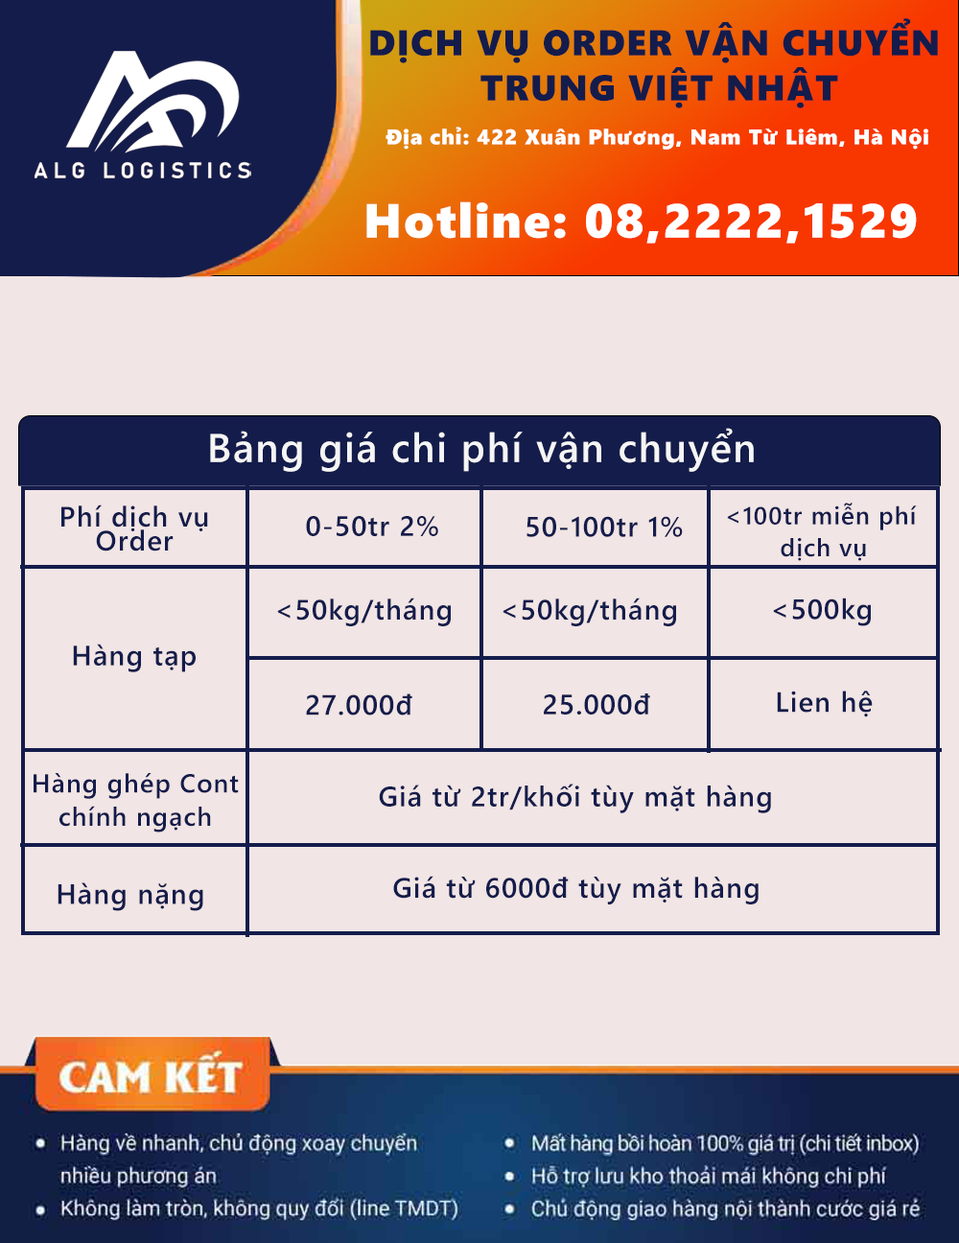
<style>
.page{position:relative;width:959px;height:1243px;background:#f1e5e5}
.page>*{position:absolute;margin:0}
.t1{font:36px/45.1px "SegoeUIBlack";letter-spacing:0.04em;color:#141c4b}
.t2{font:21.2px "SegoeUIBlack";letter-spacing:0.04em;color:#ffffff}
.t3{font:48px "SegoeUIBlack";letter-spacing:0.04em;color:#ffffff}
.t4{font:40px "SegoeUI-Semibold";letter-spacing:0.04em;color:#f5f5f5}
.t5{font:28px/24px "SegoeUI-Semibold";letter-spacing:0.04em;color:#141c4b}
.t6{font:24.7px/31.8px "SegoeUI-Semibold";letter-spacing:0.04em;color:#141c4b}
.t7{font:28px "SegoeUI-Semibold";letter-spacing:0.04em;color:#141c4b}
.t8{font:26px/33.4px "SegoeUI-Semibold";letter-spacing:0.04em;color:#141c4b}
</style>
<div class="page">
<p class="t1" style="left:370px;top:18px;width:568px;height:90px;text-align:center">DỊCH VỤ ORDER VẬN CHUYỂN <br>TRUNG VIỆT NHẬT</p>
<p class="t2" style="left:386px;top:127px;width:543px;height:23px">Địa chỉ: 422 Xuân Phương, Nam Từ Liêm, Hà Nội</p>
<p class="t3" style="left:366px;top:201px;width:551px;height:43px">Hotline: 08,2222,1529</p>
<p class="t4" style="left:210px;top:428px;width:544px;height:44px">Bảng giá chi phí vận chuyển</p>
<p class="t5" style="left:61px;top:505px;width:147px;height:47px;text-align:center">Phí dịch vụ<br>Order</p>
<p class="t6" style="left:727px;top:503px;width:190px;height:58px;text-align:center">&lt;100tr miễn phí <br>dịch vụ</p>
<p class="t7" style="left:306px;top:516px;width:132px;height:20px">0-50tr 2%</p>
<p class="t7" style="left:527px;top:516px;width:156px;height:21px">50-100tr 1%</p>
<p class="t7" style="left:277px;top:598px;width:174px;height:28px">&lt;50kg/tháng</p>
<p class="t7" style="left:503px;top:598px;width:173px;height:28px">&lt;50kg/tháng</p>
<p class="t7" style="left:773px;top:598px;width:98px;height:28px">&lt;500kg</p>
<p class="t7" style="left:73px;top:644px;width:123px;height:28px">Hàng tạp</p>
<p class="t7" style="left:306px;top:694px;width:106px;height:22px">27.000đ</p>
<p class="t7" style="left:544px;top:694px;width:106px;height:21px">25.000đ</p>
<p class="t7" style="left:777px;top:691px;width:96px;height:26px">Lien hệ</p>
<p class="t8" style="left:34px;top:773px;width:205px;height:60px;text-align:center">Hàng ghép Cont<br>chính ngạch</p>
<p class="t7" style="left:379px;top:784px;width:392px;height:29px">Giá từ 2tr/khối tùy mặt hàng</p>
<p class="t7" style="left:393px;top:876px;width:366px;height:29px">Giá từ 6000đ tùy mặt hàng</p>
<p class="t7" style="left:58px;top:882px;width:145px;height:29px">Hàng nặng</p>
</div>
